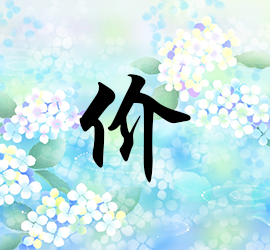
<style>
.page{position:relative;width:270px;height:250px}
.page>*{position:absolute;margin:0}
.t1{font:128px "STXingkai";color:#000000}
</style>
<div class="page">
<p class="t1" style="left:79px;top:74px;width:112px;height:109px">价</p>
</div>
